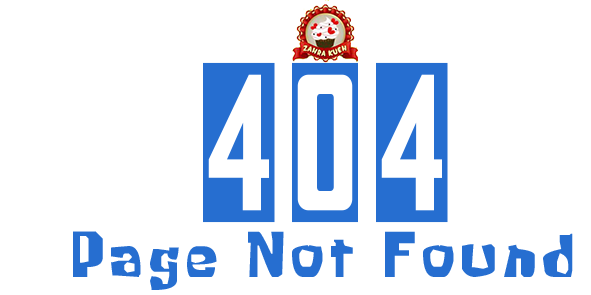
<style>
.page{position:relative;width:591px;height:295px;background:#ffffff}
.page>*{position:absolute;margin:0}
.t1{font:198.7px "yorkwhiteletter";letter-spacing:0.1em;color:#266ed0}
.t2{font:60.4px "KrabbyPatty";letter-spacing:0.1em;color:#266ed0}
</style>
<div class="page">
<p class="t1" style="left:203px;top:62px;width:245px;height:161px">404</p>
<p class="t2" style="left:73px;top:231px;width:500px;height:59px">Page Not Found</p>
</div>
